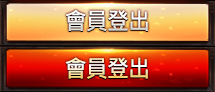
<style>
.page{position:relative;width:215px;height:92px}
.page>*{position:absolute;margin:0}
.t1{font:23.7px "MicrosoftJhengHeiBold";letter-spacing:-0.05em;color:#ffffff;scale:0.94 1}
.t2{font:23.7px "MicrosoftJhengHeiBold";letter-spacing:-0.05em;scale:0.94 1}
</style>
<div class="page">
<p class="t1" style="left:65px;top:10px;width:83px;height:22px">會員登出</p>
<p class="t2" style="left:65px;top:57px;width:83px;height:22px">會員登出</p>
</div>
